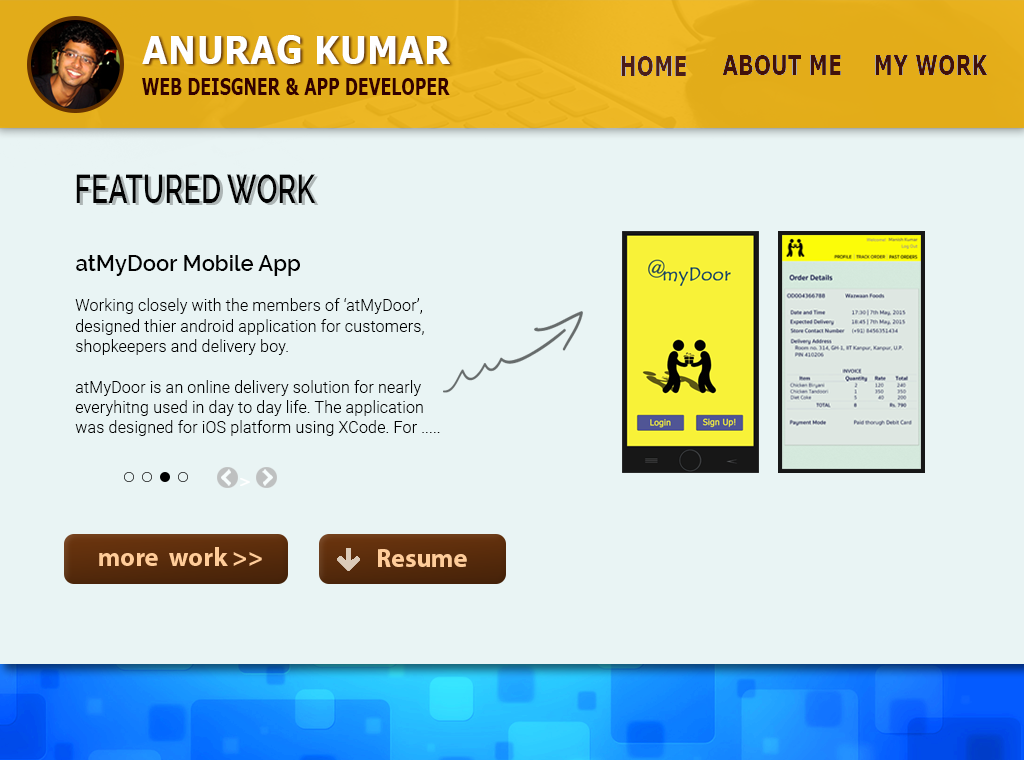
<style>
.page{position:relative;width:1024px;height:760px;background:#e9f4f4}
.page>*{position:absolute;margin:0}
.t1{font:38.5px "Verdana-Bold";color:#ffffff;scale:0.87 1}
.t2{font:27.3px "Verdana-Bold";color:#420f09;scale:0.75 1}
.t3{font:22.8px "Verdana-Bold";color:#330000;scale:0.69 1}
.t4{font:40.3px "Raleway-SemiBold";color:#030303;scale:0.71 1}
.t5{font:22px "Raleway-SemiBold";color:#020202}
.t6{font:16.9px "Roboto-Light";color:#020202;scale:0.97 1}
.t7{font:26.3px "MyriadPro-Bold";color:#ffcc99}
</style>
<div class="page">
<p class="t1" style="left:142px;top:35px;width:308px;height:29px">ANURAG KUMAR</p>
<p class="t2" style="left:621px;top:56px;width:65px;height:20px">HOME</p>
<p class="t2" style="left:722px;top:55px;width:119px;height:20px">ABOUT ME</p>
<p class="t2" style="left:875px;top:55px;width:113px;height:20px">MY WORK</p>
<p class="t3" style="left:142px;top:78px;width:308px;height:17px">WEB DEISGNER &amp; APP DEVELOPER</p>
<p class="t4" style="left:76px;top:174px;width:240px;height:29px">FEATURED WORK</p>
<p class="t5" style="left:76px;top:255px;width:224px;height:21px">atMyDoor Mobile App</p>
<p class="t6" style="left:75px;top:298px;width:365px;height:138px">Working closely with the members of ‘atMyDoor’, <br>designed thier android application for customers,  <br>shopkeepers and delivery boy. <br><br>atMyDoor is an online delivery solution for nearly <br>everyhitng used in day to day life. The application <br>was designed for iOS platform using XCode. For .....</p>
<p class="t7" style="left:378px;top:549px;width:89px;height:18px">Resume</p>
</div>
